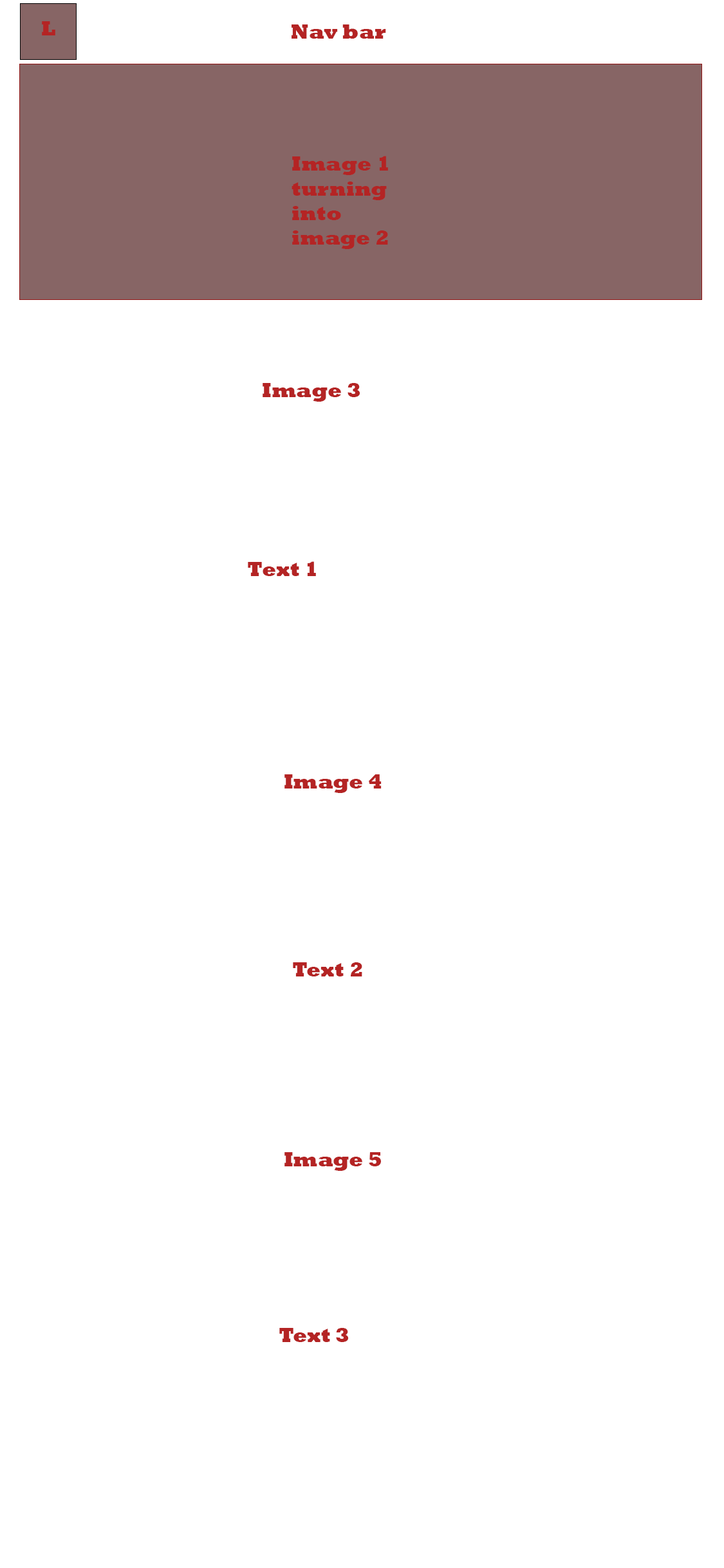
<style>
.page{position:relative;width:724px;height:1568px;background:#ffffff}
.page>*{position:absolute;margin:0}
.t1{font:20.6px "Rockwell-ExtraBold";color:#b42424}
</style>
<div class="page">
<p class="t1" style="left:42px;top:21px;width:13px;height:14px">L</p>
<p class="t1" style="left:292px;top:24px;width:94px;height:15px">Nav bar</p>
<p class="t1" style="left:292px;top:156px;width:96px;height:93px">Image 1<br>turning into image 2</p>
<p class="t1" style="left:263px;top:383px;width:97px;height:19px">Image 3</p>
<p class="t1" style="left:248px;top:561px;width:68px;height:15px">Text 1</p>
<p class="t1" style="left:285px;top:774px;width:97px;height:19px">Image 4</p>
<p class="t1" style="left:293px;top:962px;width:69px;height:14px">Text 2</p>
<p class="t1" style="left:285px;top:1152px;width:96px;height:19px">Image 5</p>
<p class="t1" style="left:279px;top:1328px;width:70px;height:14px">Text 3</p>
</div>
